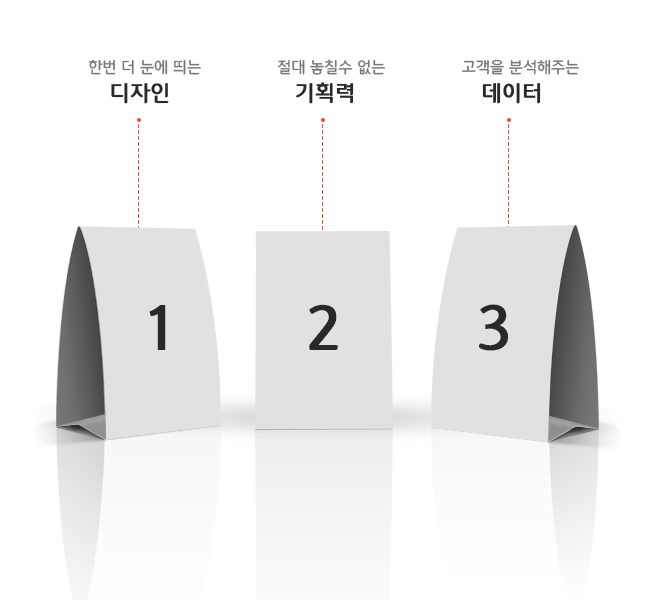
<style>
.page{position:relative;width:663px;height:600px;background:#ffffff}
.page>*{position:absolute;margin:0}
.t1{font:16px "12LotteMartDreamMedium";color:#787878;text-transform:uppercase}
.t2{font:22.3px "12LotteMartDreamMedium";color:#2a2929;text-transform:uppercase;font-weight:bold}
.t3{font:64.1px "12LotteMartDreamMedium";color:#2a2929;text-transform:uppercase;font-weight:bold}
</style>
<div class="page">
<p class="t1" style="left:89px;top:59px;width:112px;height:16px">한번 더 눈에 띄는</p>
<p class="t1" style="left:277px;top:59px;width:109px;height:16px">절대 놓칠수 없는</p>
<p class="t1" style="left:462px;top:59px;width:118px;height:16px">고객을 분석해주는</p>
<p class="t2" style="left:111px;top:83px;width:58px;height:21px">디자인</p>
<p class="t2" style="left:296px;top:82px;width:58px;height:22px">기획력</p>
<p class="t2" style="left:482px;top:83px;width:59px;height:21px">데이터</p>
<p class="t3" style="left:149px;top:305px;width:17px;height:45px">1</p>
<p class="t3" style="left:309px;top:304px;width:29px;height:46px">2</p>
<p class="t3" style="left:479px;top:304px;width:29px;height:47px">3</p>
</div>
